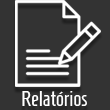
<style>
.page{position:relative;width:110px;height:110px;background:#333333}
.page>*{position:absolute;margin:0}
.t1{font:20.8px "Homenaje-Regular";color:#ffffff}
</style>
<div class="page">
<p class="t1" style="left:22px;top:91px;width:65px;height:15px">Relatórios</p>
</div>
